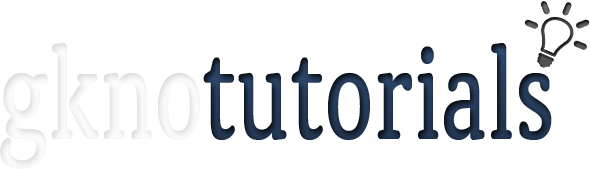
<style>
.page{position:relative;width:590px;height:169px;background:#ffffff}
.page>*{position:absolute;margin:0}
.t1{font:140px "ClassicRound-Medium";color:#fdfdfd;scale:0.7 1}
.t2{font:140px "ClassicRound-Medium";color:#20324c;scale:0.7 1}
</style>
<div class="page">
<p class="t1" style="left:0px;top:42px;width:200px;height:127px">gkno</p>
<p class="t2" style="left:203px;top:43px;width:349px;height:97px">tutorials</p>
</div>
